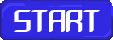
<style>
.page{position:relative;width:113px;height:40px;background:#3128e1}
.page>*{position:absolute;margin:0}
.t1{font:30px "ChemicalReactionABRK";color:#ffffff}
</style>
<div class="page">
<p class="t1" style="left:14px;top:10px;width:86px;height:22px">START</p>
</div>
